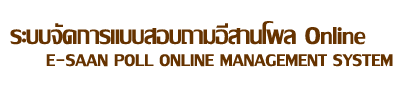
<style>
.page{position:relative;width:400px;height:95px;background:#ffffff}
.page>*{position:absolute;margin:0}
.t1{font:36px "LilyUPC";color:#663300}
.t2{font:25px "LilyUPC";color:#663300}
</style>
<div class="page">
<p class="t1" style="left:10px;top:21px;width:356px;height:24px">ระบบจัดการแบบสอบถามอีสานโพล Online</p>
<p class="t2" style="left:46px;top:54px;width:347px;height:13px">E-SAAN POLL ONLINE MANAGEMENT SYSTEM</p>
</div>
